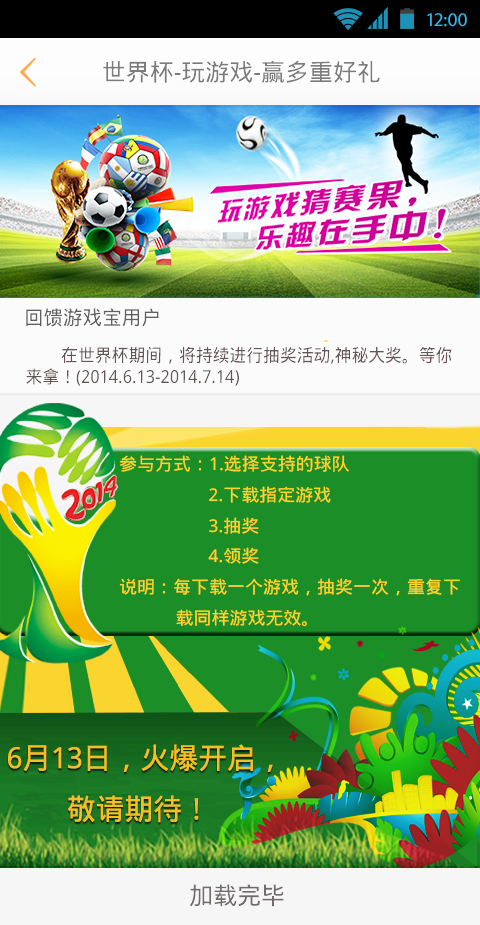
<style>
.page{position:relative;width:480px;height:925px}
.page>*{position:absolute;margin:0}
.t1{font:19.4px "MyriadPro-Regular";color:#33b5e5}
.t2{font:24px "DroidSansFallback";color:#7c7c7c}
.t3{font:20px "DroidSansFallback";color:#606060}
.t4{font:18px "DroidSansFallback";color:#544848;scale:0.94 1}
.t5{font:25.2px "DroidSansFallback";color:#544848;scale:0.94 1}
.t6{font:17.5px "DroidSansFallback";color:#f4be26}
.t7{font:29.2px "DroidSansFallback";color:#f4be26}
.t8{font:24px "DroidSansFallback";color:#605a5a}
</style>
<div class="page">
<p class="t1" style="left:427px;top:13px;width:40px;height:14px">12:00</p>
<p class="t2" style="left:103px;top:60px;width:277px;height:23px">世界杯-玩游戏-赢多重好礼</p>
<p class="t3" style="left:26px;top:308px;width:133px;height:19px">回馈游戏宝用户</p>
<p class="t4" style="left:26px;top:346px;width:426px;height:40px"><span class="t5">     </span> 在世界杯期间，将持续进行抽奖活动,神秘大奖。等你<br>来拿！(2014.6.13-2014.7.14)</p>
<p class="t6" style="left:119px;top:455px;width:341px;height:172px">参与方式：1.选择支持的球队<br>                   2.下载指定游戏<br>                   3.抽奖<br>                   4.领奖<br>说明：每下载一个游戏，抽奖一次，重复下<br>            载同样游戏无效。</p>
<p class="t7" style="left:8px;top:744px;width:265px;height:79px">6月13日，火爆开启，<br>        敬请期待！</p>
<p class="t8" style="left:190px;top:884px;width:94px;height:23px">加载完毕</p>
</div>
